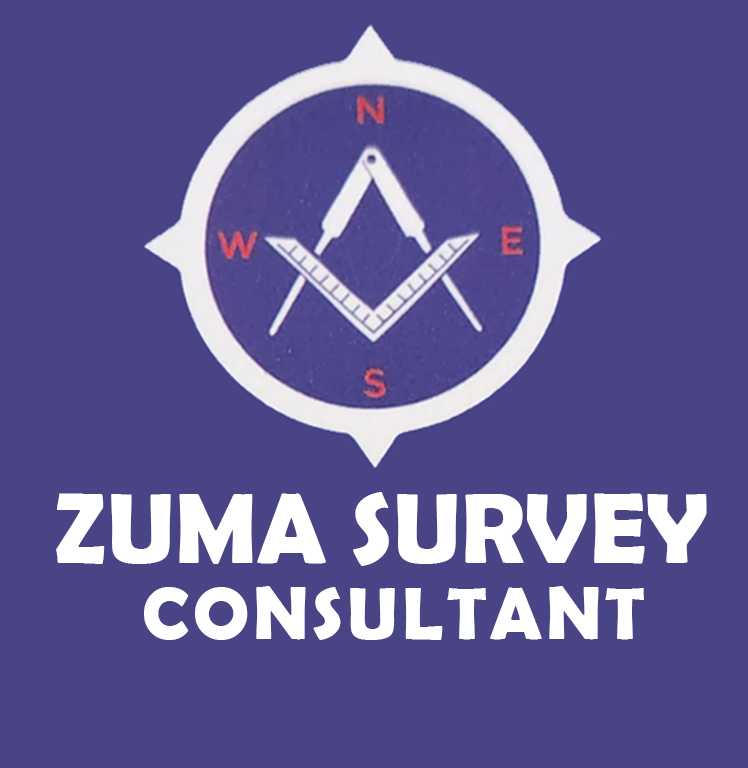
<style>
.page{position:relative;width:748px;height:768px;background:#494486}
.page>*{position:absolute;margin:0}
.t1{font:100px "BerlinSansFBDemi-Bold";color:#ffffff}
.t2{font:75px "BerlinSansFBDemi-Bold";letter-spacing:0.05em;color:#ffffff}
</style>
<div class="page">
<p class="t1" style="left:56px;top:492px;width:651px;height:74px">ZUMA SURVEY</p>
<p class="t2" style="left:144px;top:586px;width:500px;height:54px">CONSULTANT</p>
</div>
